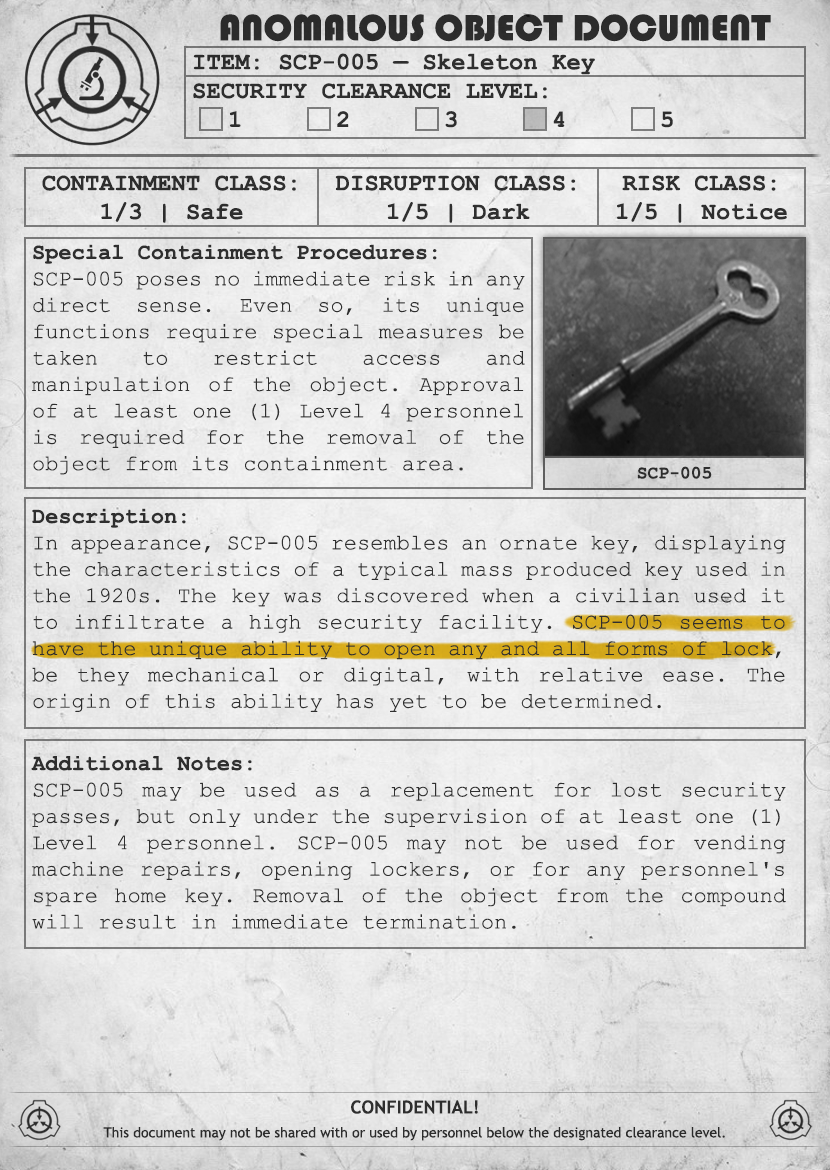
<style>
.page{position:relative;width:830px;height:1170px}
.page>*{position:absolute;margin:0}
.t1{font:38px "Bauhaus93";color:#333333;text-transform:uppercase}
.t2{font:24px "CourierNewPS-BoldMT";color:#333333}
.t3{font:24px "CourierNewPS-BoldMT";color:#333333;text-transform:uppercase}
.t4{font:22px "CourierNewPSMT";color:#333333}
.t5{font:22px "CourierNewPS-BoldMT";color:#333333}
.t6{font:18px "CourierNewPS-BoldMT";color:#333333}
.t7{font:14px/24px "TrebuchetMS";color:#333333}
.t8{font:18px/24px "TrebuchetMS-Bold";color:#333333}
</style>
<div class="page">
<p class="t1" style="left:220px;top:14px;width:551px;height:28px">anomalous object document</p>
<p class="t2" style="left:193px;top:53px;width:480px;height:75px">ITEM: SCP-005 — Skeleton Key<br><span class="t3">Security CLEARANCE LEVEL:</span> <br> 1   2   3   4   5</p>
<p class="t2" style="left:42px;top:175px;width:254px;height:48px;text-align:center">CONTAINMENT CLASS:<br>1/3 | Safe</p>
<p class="t2" style="left:335px;top:175px;width:241px;height:48px;text-align:center">DISRUPTION CLASS:<br>1/5 | Dark</p>
<p class="t2" style="left:617px;top:175px;width:170px;height:48px;text-align:center">RISK CLASS:<br>1/5 | Notice</p>
<p class="t4" style="left:32px;top:244px;width:493px;height:231px;text-align:justify"><span class="t5">Special Containment Procedures:<br></span>SCP-005 poses no immediate risk in any direct sense. Even so, its unique functions require special measures be taken to restrict access and manipulation of the object. Approval of at least one (1) Level 4 personnel is required for the removal of the object from its containment area.</p>
<p class="t6" style="left:637px;top:466px;width:75px;height:13px">SCP-005</p>
<p class="t4" style="left:32px;top:508px;width:754px;height:204px;text-align:justify"><span class="t5">Description:<br></span>In appearance, SCP-005 resembles an ornate key, displaying the characteristics of a typical mass produced key used in the 1920s. The key was discovered when a civilian used it to infiltrate a high security facility. SCP-005 seems to have the unique ability to open any and all forms of lock, be they mechanical or digital, with relative ease. The origin of this ability has yet to be determined.</p>
<p class="t4" style="left:31px;top:756px;width:755px;height:173px;text-align:justify"><span class="t5">Additional Notes:</span> <br>SCP-005 may be used as a replacement for lost security passes, but only under the supervision of at least one (1) Level 4 personnel. SCP-005 may not be used for vending machine repairs, opening lockers, or for any personnel's spare home key. Removal of the object from the compound will result in immediate termination.</p>
<p class="t7" style="left:103px;top:1100px;width:622px;height:41px;text-align:center"><span class="t8">CONFIDENTIAL!<br></span>This document may not be shared with or used by personnel below the designated clearance level.</p>
</div>
